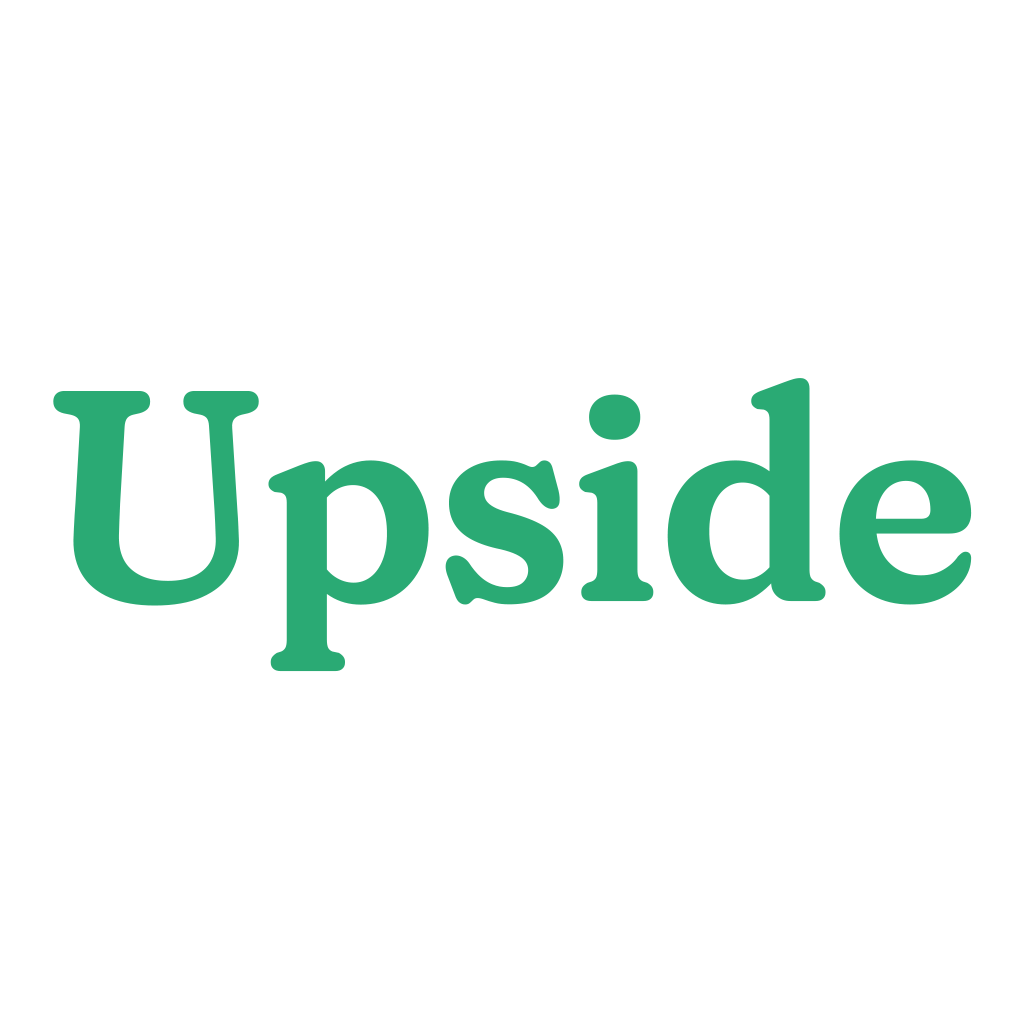
<style>
.page{position:relative;width:1024px;height:1024px;background:#ffffff}
.page>*{position:absolute;margin:0}
.t1{font:300px "Fraunces72ptSuperSoft-SemiBold";color:#2aaa74}
</style>
<div class="page">
<p class="t1" style="left:53px;top:378px;width:919px;height:294px">Upside</p>
</div>
